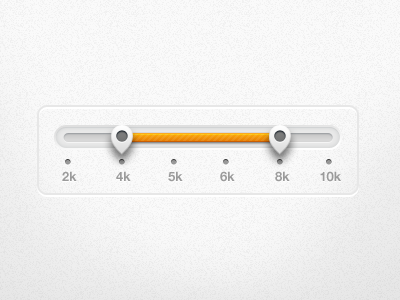
<style>
.page{position:relative;width:400px;height:300px;background:#fafafa}
.page>*{position:absolute;margin:0}
.t1{font:13px "HelveticaNeueLTStd-Bd";color:#9b9b9b}
</style>
<div class="page">
<p class="t1" style="left:62px;top:171px;width:15px;height:10px">2k</p>
<p class="t1" style="left:116px;top:171px;width:15px;height:10px">4k</p>
<p class="t1" style="left:168px;top:171px;width:15px;height:11px">5k</p>
<p class="t1" style="left:220px;top:171px;width:15px;height:11px">6k</p>
<p class="t1" style="left:275px;top:171px;width:15px;height:11px">8k</p>
<p class="t1" style="left:320px;top:171px;width:21px;height:11px">10k</p>
</div>
